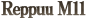
<style>
.page{position:relative;width:96px;height:18px;background:#ffffff}
.page>*{position:absolute;margin:0}
.t1{font:18px "RyuminPro-ExBold";letter-spacing:-0.08em;color:#4a3f32;font-weight:bold;scale:0.9 1}
</style>
<div class="page">
<p class="t1" style="left:1px;top:1px;width:85px;height:18px">Reppuu M11</p>
</div>
